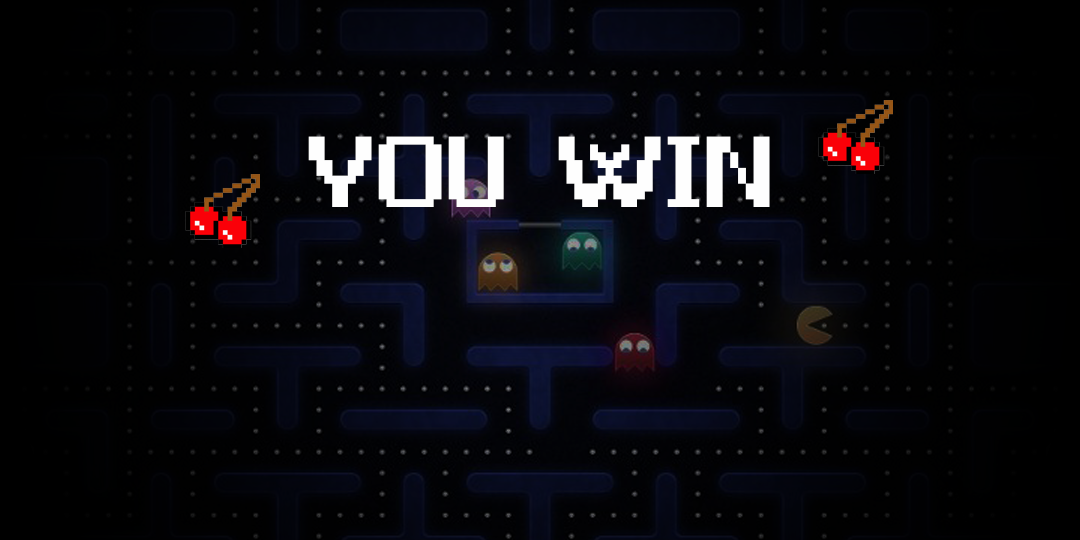
<style>
.page{position:relative;width:1080px;height:540px}
.page>*{position:absolute;margin:0}
.t1{font:250px "Game-Over";color:#fefefe}
</style>
<div class="page">
<p class="t1" style="left:308px;top:136px;width:462px;height:71px">YOU  WIN</p>
</div>
